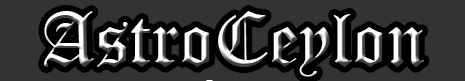
<style>
.page{position:relative;width:465px;height:81px;background:#333333}
.page>*{position:absolute;margin:0}
.t1{font:75px "OldEnglishTextMT"}
</style>
<div class="page">
<p class="t1" style="left:44px;top:11px;width:380px;height:66px">AstroCeylon</p>
</div>
